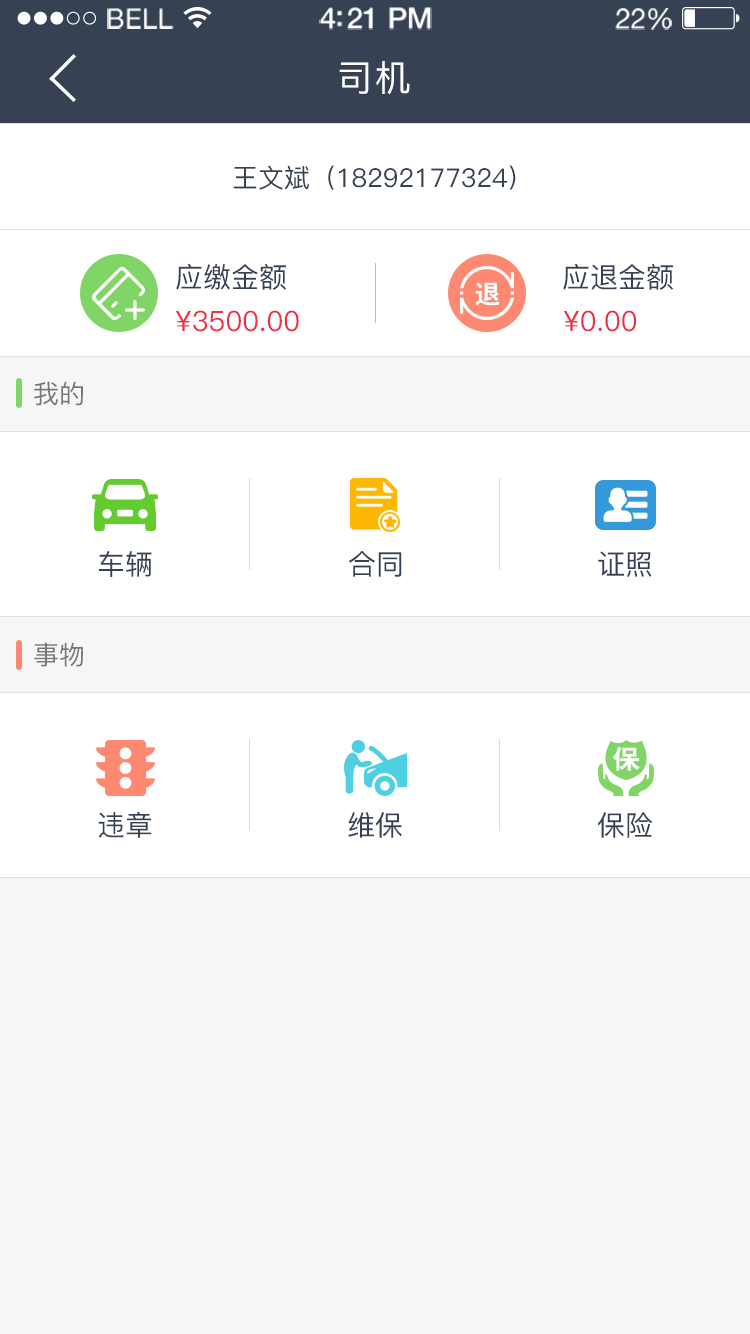
<style>
.page{position:relative;width:750px;height:1334px;background:#f6f6f6}
.page>*{position:absolute;margin:0}
.t1{font:26.9px "HelveticaNeue";letter-spacing:0.02em;color:#ffffff}
.t2{font:29.3px "HelveticaNeue-Medium";letter-spacing:-0.02em;color:#ffffff}
.t3{font:28.1px "HelveticaNeue";letter-spacing:-0.02em;color:#ffffff}
.t4{font:36px "PingFang-SC-Medium";letter-spacing:0.05em;color:#ffffff}
.t5{font:26px "PingFang-SC-Medium";color:#364153}
.t6{font:28px "PingFang-SC-Medium";color:#364153}
.t7{font:28px "PingFang-SC-Medium";color:#ec3147}
.t8{font:26px "PingFang-SC-Medium";color:#787878}
</style>
<div class="page">
<p class="t1" style="left:107px;top:8px;width:67px;height:21px">BELL</p>
<p class="t2" style="left:319px;top:7px;width:113px;height:23px">4:21 PM</p>
<p class="t3" style="left:615px;top:8px;width:57px;height:22px">22%</p>
<p class="t4" style="left:339px;top:61px;width:71px;height:34px">司机</p>
<p class="t5" style="left:233px;top:165px;width:283px;height:25px">王文斌（18292177324）</p>
<p class="t6" style="left:176px;top:264px;width:110px;height:26px">应缴金额</p>
<p class="t6" style="left:563px;top:264px;width:110px;height:26px">应退金额</p>
<p class="t7" style="left:175px;top:310px;width:124px;height:22px">¥3500.00</p>
<p class="t7" style="left:563px;top:310px;width:74px;height:22px">¥0.00</p>
<p class="t8" style="left:34px;top:381px;width:49px;height:25px">我的</p>
<p class="t6" style="left:99px;top:551px;width:53px;height:26px">车辆</p>
<p class="t6" style="left:348px;top:551px;width:54px;height:26px">合同</p>
<p class="t6" style="left:598px;top:551px;width:54px;height:26px">证照</p>
<p class="t8" style="left:34px;top:642px;width:49px;height:25px">事物</p>
<p class="t6" style="left:98px;top:812px;width:54px;height:26px">违章</p>
<p class="t6" style="left:348px;top:812px;width:54px;height:26px">维保</p>
<p class="t6" style="left:598px;top:812px;width:55px;height:26px">保险</p>
</div>
